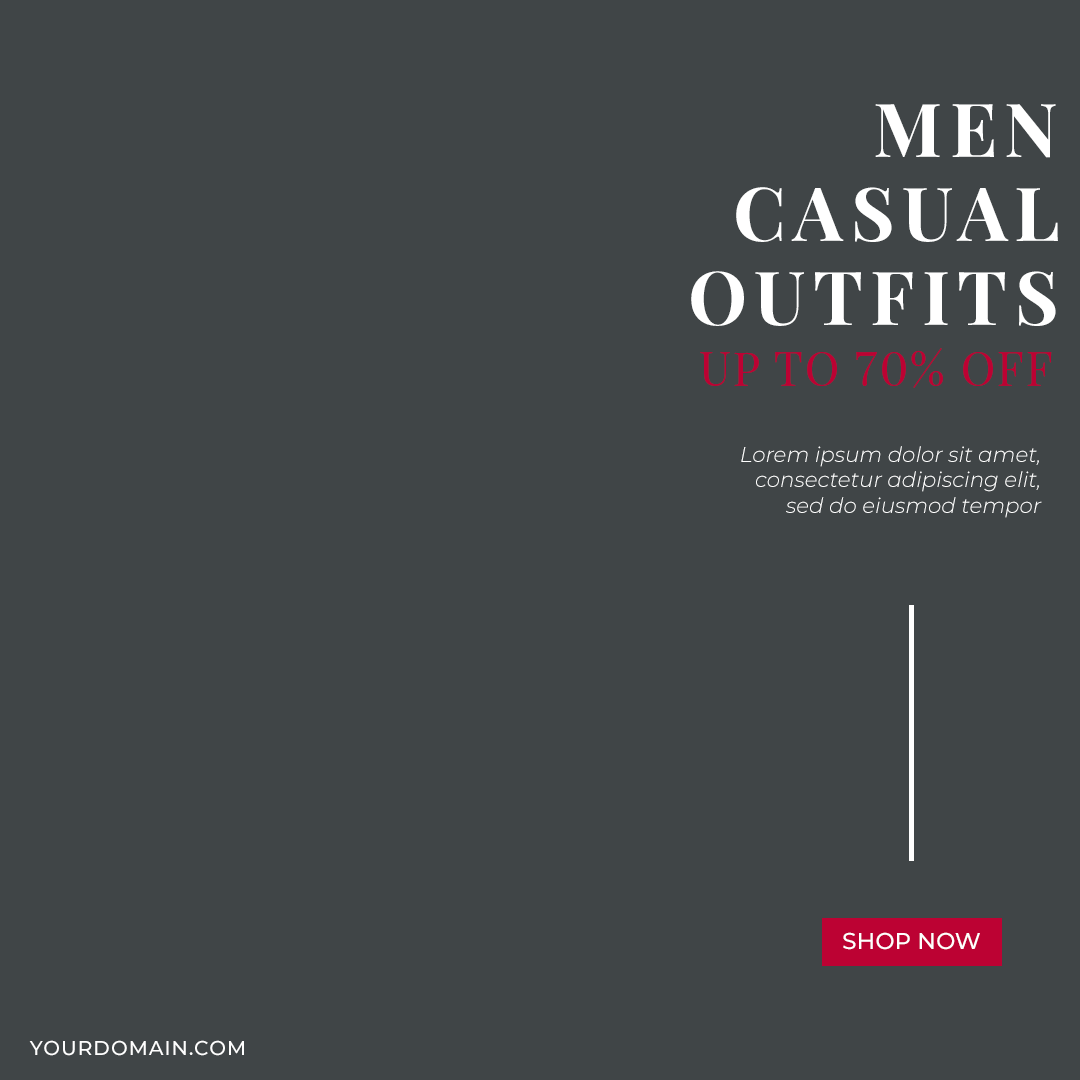
<style>
.page{position:relative;width:1080px;height:1080px;background:#404547}
.page>*{position:absolute;margin:0}
.t1{font:74.6px/83.9px "PlayfairDisplay-Bold";letter-spacing:0.1em;color:#ffffff;text-transform:uppercase}
.t2{font:46.4px "PlayfairDisplay-Regular";letter-spacing:0.05em;color:#bc0233;text-transform:uppercase}
.t3{font:21.4px "Montserrat-LightItalic";color:#ffffff}
.t4{font:23px "Montserrat-Medium";color:#ffffff;text-transform:uppercase}
.t5{font:20px "Montserrat-Medium";letter-spacing:0.05em;color:#fefefe;text-transform:uppercase}
</style>
<div class="page">
<p class="t1" style="left:691px;top:104px;width:367px;height:222px;text-align:right">men<br>casual<br>outfits</p>
<p class="t2" style="left:700px;top:348px;width:352px;height:40px">Up To 70% Off</p>
<p class="t3" style="left:741px;top:446px;width:301px;height:72px;text-align:right">Lorem ipsum dolor sit amet, consectetur adipiscing elit, sed do eiusmod tempor</p>
<p class="t4" style="left:843px;top:932px;width:137px;height:18px">Shop Now</p>
<p class="t5" style="left:29px;top:1040px;width:215px;height:16px">Yourdomain.com</p>
</div>
